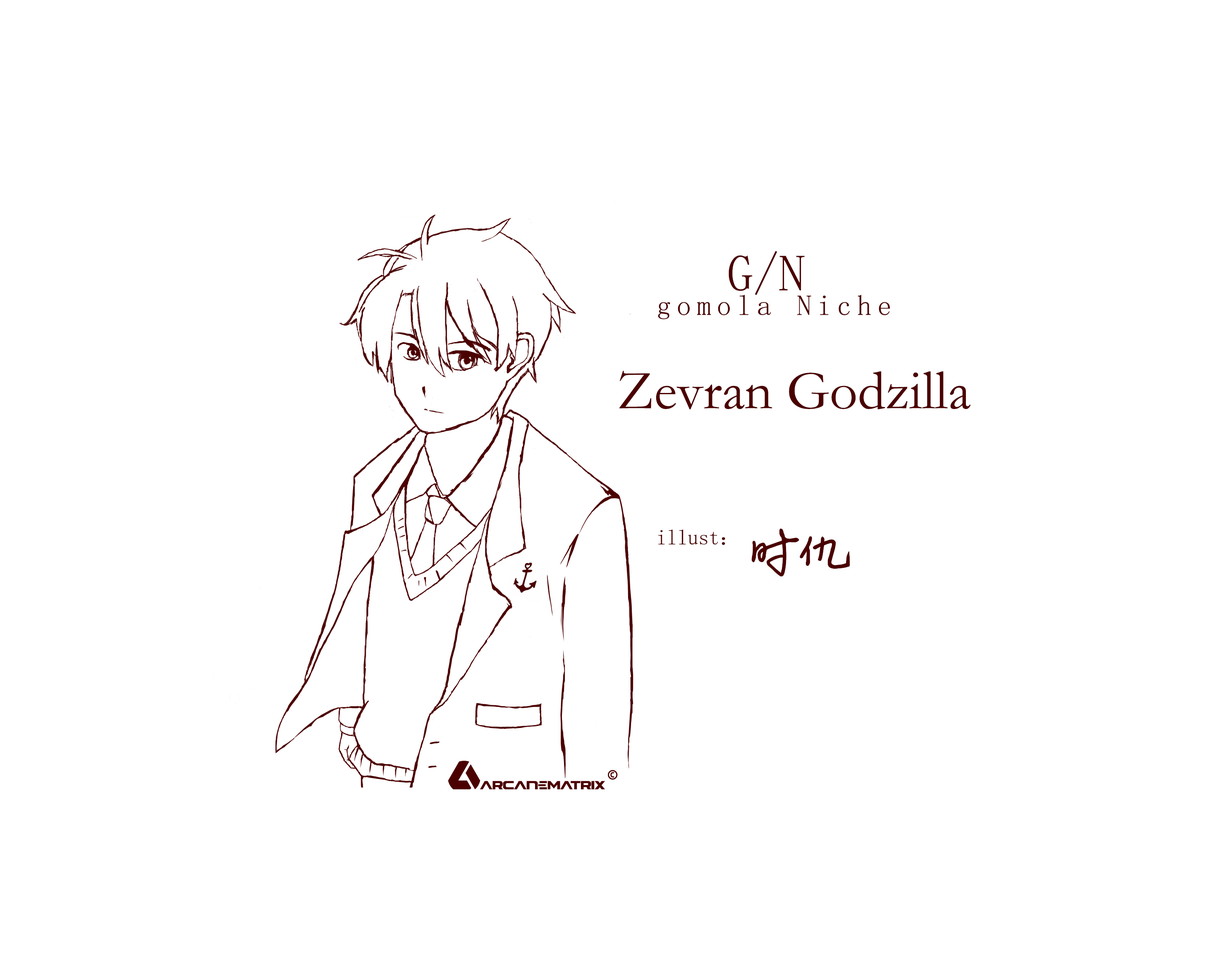
<style>
.page{position:relative;width:1221px;height:977px;background:#ffffff}
.page>*{position:absolute;margin:0}
.t1{font:51.7px "NSimSun";color:#4b0000}
.t2{font:28.6px "SimSun";letter-spacing:0.2em;color:#4b0000}
.t3{font:55.6px "STSong";color:#4b0000}
.t4{font:21.1px "SimSun";color:#4b0000}
</style>
<div class="page">
<p class="t1" style="left:729px;top:251px;width:76px;height:44px">G/N</p>
<p class="t2" style="left:658px;top:294px;width:232px;height:25px">gomola Niche</p>
<p class="t3" style="left:619px;top:370px;width:352px;height:39px">Zevran Godzilla</p>
<p class="t4" style="left:658px;top:529px;width:67px;height:16px">illust：</p>
</div>
